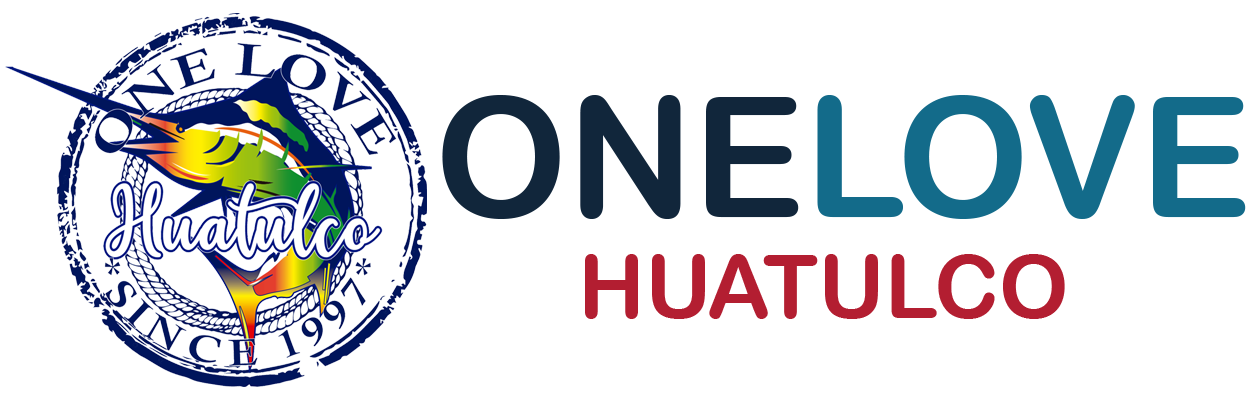
<style>
.page{position:relative;width:1250px;height:400px;background:#ffffff}
.page>*{position:absolute;margin:0}
.t1{font:166.7px "ArialRoundedMTBold";color:#11263b}
.t2{font:166.7px "ArialRoundedMTBold";color:#136b8a}
.t3{font:88.1px "ArialRoundedMTBold";color:#b31e31}
</style>
<div class="page">
<p class="t1" style="left:442px;top:95px;width:357px;height:124px">ONE</p>
<p class="t2" style="left:817px;top:95px;width:429px;height:124px">LOVE</p>
<p class="t3" style="left:585px;top:254px;width:480px;height:65px">HUATULCO</p>
</div>
